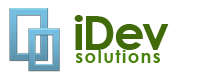
<style>
.page{position:relative;width:200px;height:79px;background:#ffffff}
.page>*{position:absolute;margin:0}
.t1{font:48px "CenturyGothic-Bold";letter-spacing:-0.05em;color:#416b0a}
.t2{font:18px "CenturyGothic-Bold";letter-spacing:0.075em;color:#4a830c}
</style>
<div class="page">
<p class="t1" style="left:74px;top:15px;width:95px;height:35px">iDev</p>
<p class="t2" style="left:75px;top:50px;width:85px;height:13px">solutions</p>
</div>
